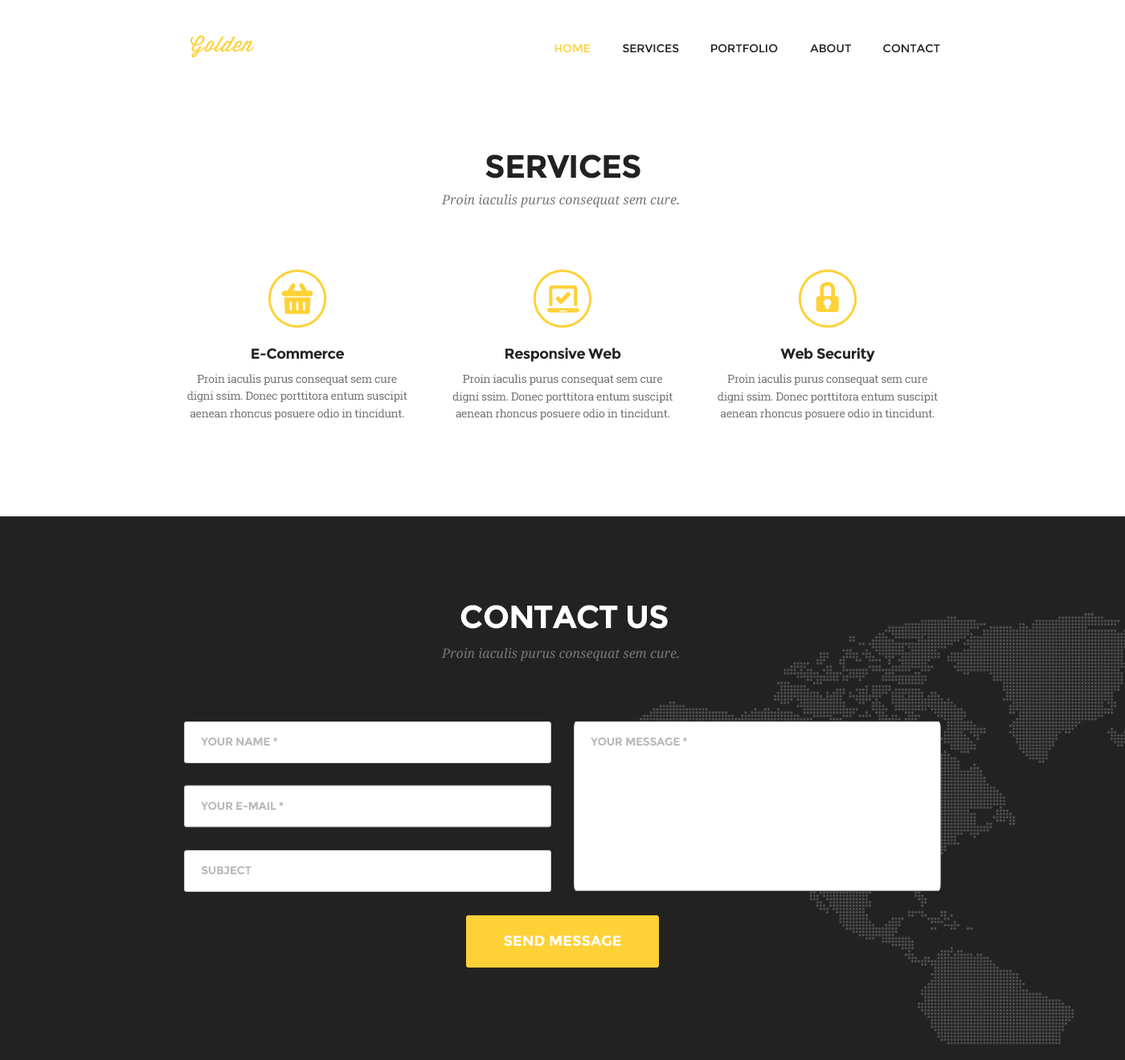
<style>
.page{position:relative;width:1125px;height:1060px;background:#ffffff}
.page>*{position:absolute;margin:0}
.t1{font:20.9px "Wisdom-Script";letter-spacing:0.05em;color:#fed136}
.t2{font:11.3px "Montserrat-Regular";color:#fed136;text-transform:uppercase}
.t3{font:11.3px "Montserrat-Regular";color:#222222;text-transform:uppercase}
.t4{font:32.2px "Montserrat-Bold";letter-spacing:-0.025em;color:#222222;text-transform:uppercase}
.t5{font:12.9px "DroidSerif-Italic";color:#777777}
.t6{font:14.5px "Montserrat-Bold";letter-spacing:-0.025em;color:#222222}
.t7{font:11.3px "RobotoSlab-Regular";letter-spacing:-0.025em;color:#777777}
.t8{font:32.2px "Montserrat-Bold";letter-spacing:-0.025em;color:#ffffff;text-transform:uppercase}
.t9{font:11.3px "Montserrat-Bold";letter-spacing:-0.025em;color:#bbbbbb;text-transform:uppercase}
.t10{font:14.5px "Montserrat-Bold";color:#ffffff;text-transform:uppercase}
</style>
<div class="page">
<p class="t1" style="left:191px;top:35px;width:63px;height:23px">Golden</p>
<p class="t2" style="left:555px;top:44px;width:36px;height:8px">Home</p>
<p class="t3" style="left:623px;top:44px;width:56px;height:8px">Services</p>
<p class="t3" style="left:711px;top:44px;width:67px;height:8px">Portfolio</p>
<p class="t3" style="left:810px;top:44px;width:41px;height:8px">About</p>
<p class="t3" style="left:883px;top:44px;width:58px;height:8px">Contact</p>
<p class="t4" style="left:486px;top:154px;width:155px;height:24px">Services</p>
<p class="t5" style="left:441px;top:194px;width:238px;height:13px">Proin iaculis purus consequat sem cure.</p>
<p class="t6" style="left:252px;top:348px;width:92px;height:11px">E-Commerce</p>
<p class="t6" style="left:506px;top:347px;width:115px;height:15px">Responsive Web</p>
<p class="t6" style="left:781px;top:347px;width:94px;height:15px">Web Security</p>
<p class="t7" style="left:187px;top:374px;width:221px;height:46px;text-align:center">Proin iaculis purus consequat sem cure <br>digni ssim. Donec porttitora entum suscipit <br>aenean rhoncus posuere odio in tincidunt.</p>
<p class="t7" style="left:453px;top:374px;width:220px;height:46px;text-align:center">Proin iaculis purus consequat sem cure <br>digni ssim. Donec porttitora entum suscipit <br>aenean rhoncus posuere odio in tincidunt.</p>
<p class="t7" style="left:718px;top:374px;width:220px;height:46px;text-align:center">Proin iaculis purus consequat sem cure <br>digni ssim. Donec porttitora entum suscipit <br>aenean rhoncus posuere odio in tincidunt.</p>
<p class="t8" style="left:461px;top:605px;width:207px;height:24px">Contact us</p>
<p class="t5" style="left:441px;top:647px;width:238px;height:14px">Proin iaculis purus consequat sem cure.</p>
<p class="t9" style="left:201px;top:737px;width:76px;height:8px">your Name *</p>
<p class="t9" style="left:591px;top:737px;width:96px;height:8px">Your message *</p>
<p class="t9" style="left:201px;top:801px;width:83px;height:9px">your e-mail *</p>
<p class="t9" style="left:201px;top:866px;width:51px;height:8px">subject</p>
<p class="t10" style="left:504px;top:935px;width:117px;height:11px">Send Message</p>
</div>
